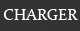
<style>
.page{position:relative;width:80px;height:31px;background:#333333}
.page>*{position:absolute;margin:0}
.t1{font:16px "Constantia";color:#ffffff}
</style>
<div class="page">
<p class="t1" style="left:3px;top:9px;width:75px;height:11px">CHARGER</p>
</div>
